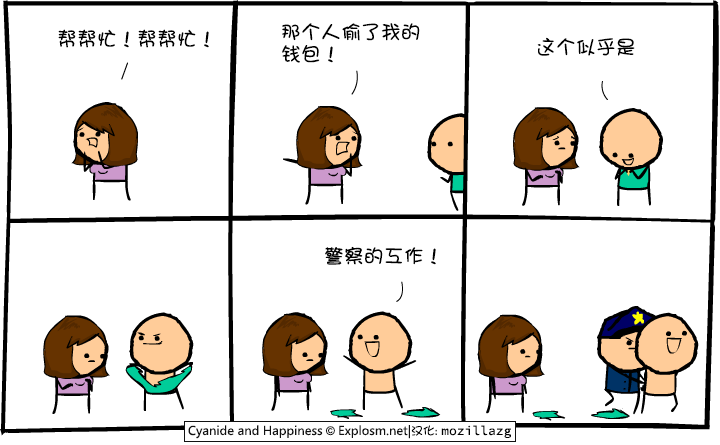
<style>
.page{position:relative;width:720px;height:445px;background:#ffffff}
.page>*{position:absolute;margin:0}
.t1{font:20px "DFGirl";color:#000000}
.t2{font:20px/22px "DFGirl";color:#000000}
</style>
<div class="page">
<p class="t1" style="left:58px;top:29px;width:151px;height:19px">帮帮忙！帮帮忙！</p>
<p class="t2" style="left:282px;top:23px;width:138px;height:40px">那个人偷了我的<br>钱包！</p>
<p class="t1" style="left:537px;top:37px;width:98px;height:19px">这个似乎是</p>
<p class="t1" style="left:325px;top:246px;width:111px;height:19px">警察的工作！</p>
</div>
